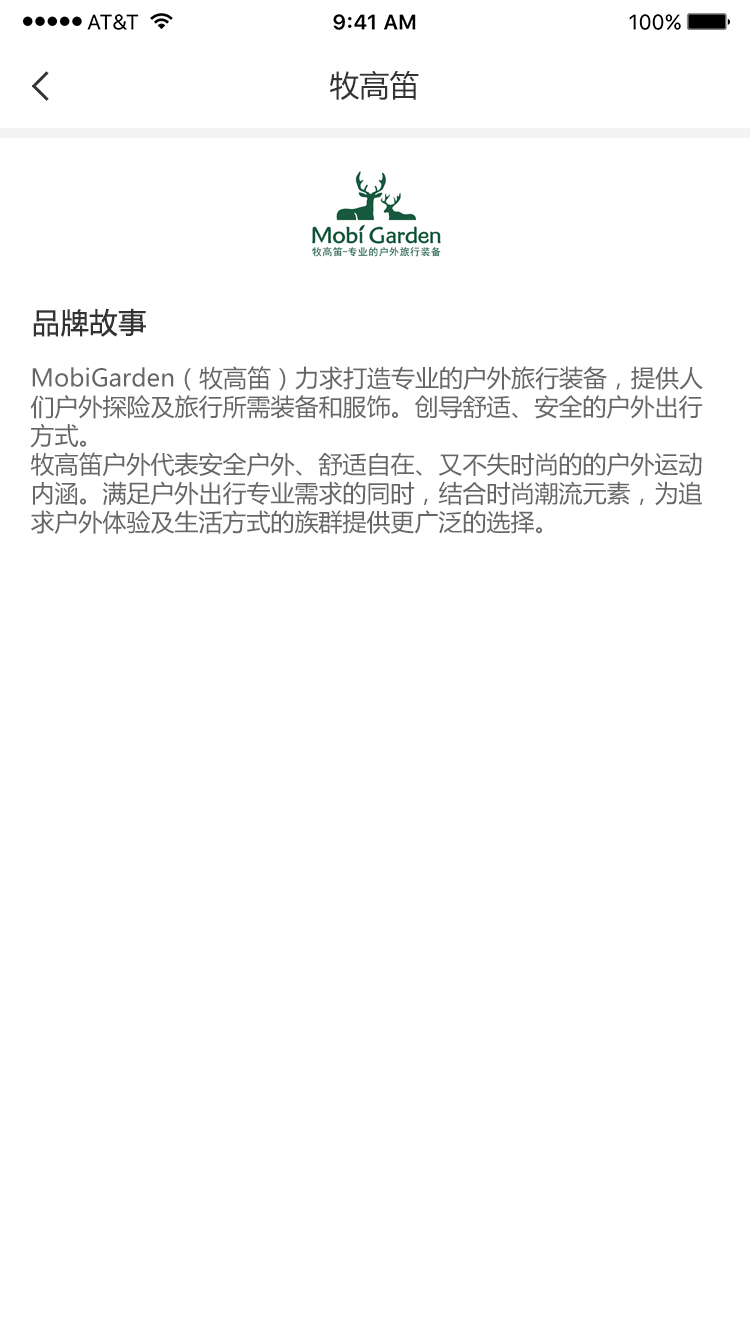
<style>
.page{position:relative;width:750px;height:1335px;background:#ffffff}
.page>*{position:absolute;margin:0}
.t1{font:30px "MicrosoftYaHei";color:#333333}
.t2{font:28px "MicrosoftYaHei";color:#333333;font-weight:bold}
.t3{font:24px "MicrosoftYaHei";color:#666666}
</style>
<div class="page">
<p class="t1" style="left:330px;top:70px;width:89px;height:30px">牧高笛</p>
<p class="t2" style="left:33px;top:308px;width:113px;height:29px">品牌故事</p>
<p class="t3" style="left:30px;top:366px;width:673px;height:168px">MobiGarden（牧高笛）力求打造专业的户外旅行装备，提供人们户外探险及旅行所需装备和服饰。创导舒适、安全的户外出行方式。<br>牧高笛户外代表安全户外、舒适自在、又不失时尚的的户外运动内涵。满足户外出行专业需求的同时，结合时尚潮流元素，为追求户外体验及生活方式的族群提供更广泛的选择。</p>
</div>
